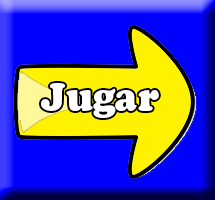
<style>
.page{position:relative;width:215px;height:200px;background:#0000ff}
.page>*{position:absolute;margin:0}
.t1{font:37.5px "CooperBlackStd";color:#ffffff}
</style>
<div class="page">
<p class="t1" style="left:41px;top:83px;width:118px;height:35px">Jugar</p>
</div>
